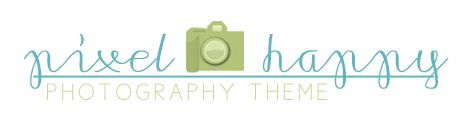
<style>
.page{position:relative;width:464px;height:120px;background:#ffffff}
.page>*{position:absolute;margin:0}
.t1{font:72px "MoradoSharp-Regular";letter-spacing:-0.01em;color:#60b5bf;font-weight:bold}
.t2{font:24px "CicleFina";letter-spacing:0.15em;color:#cad898;text-transform:uppercase}
</style>
<div class="page">
<p class="t1" style="left:24px;top:33px;width:425px;height:56px">pixel    happy</p>
<p class="t2" style="left:47px;top:83px;width:280px;height:18px">photography theme</p>
</div>
